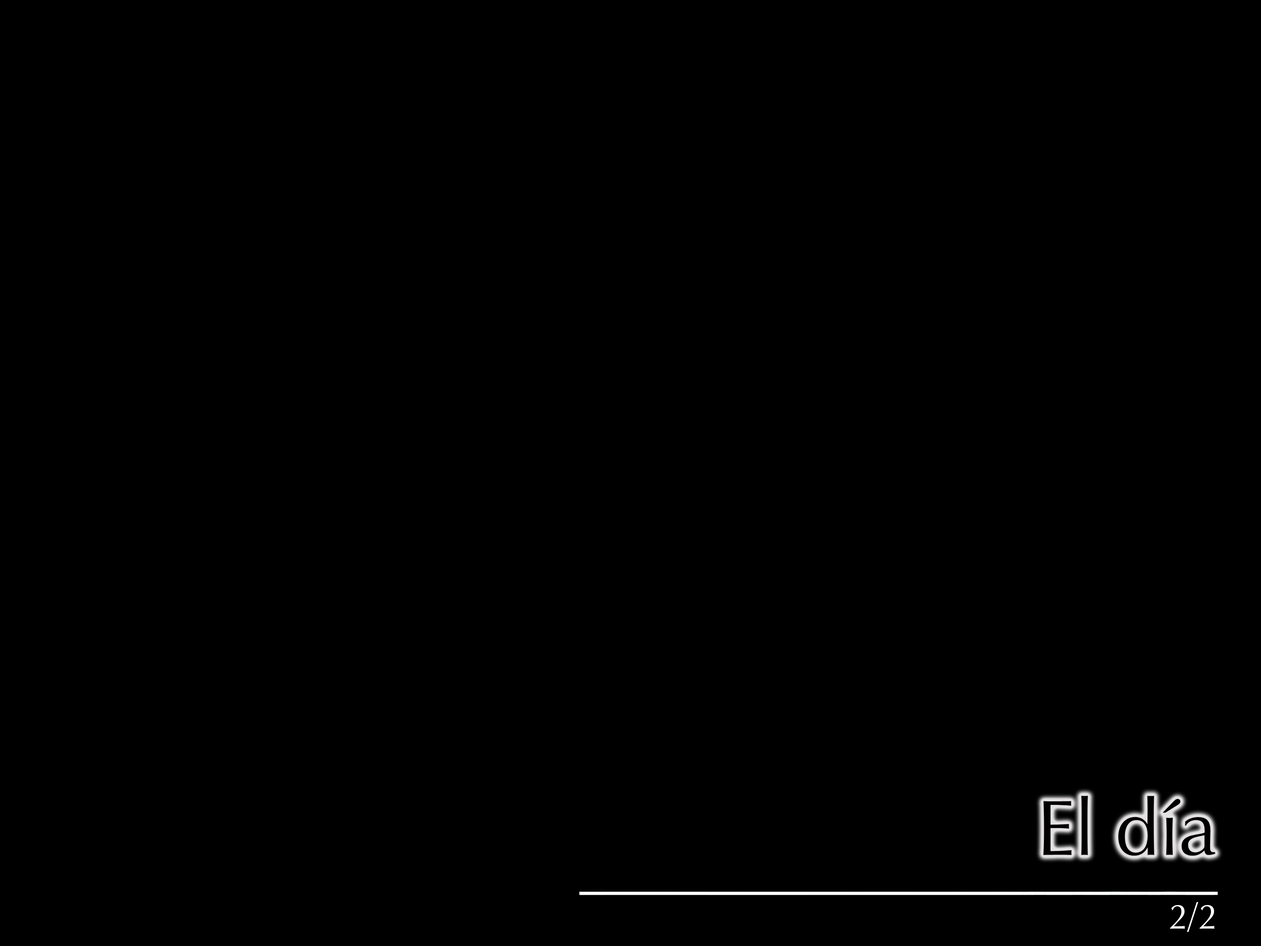
<style>
.page{position:relative;width:1261px;height:946px;background:#000000}
.page>*{position:absolute;margin:0}
.t1{font:78.8px "ZapfHumanist601BT-Roman";color:#010101}
.t2{font:35.5px "ZapfHumanist601BT-Roman";color:#ffffff}
</style>
<div class="page">
<p class="t1" style="left:1043px;top:796px;width:172px;height:59px">El día</p>
<p class="t2" style="left:1170px;top:902px;width:44px;height:30px">2/2</p>
</div>
